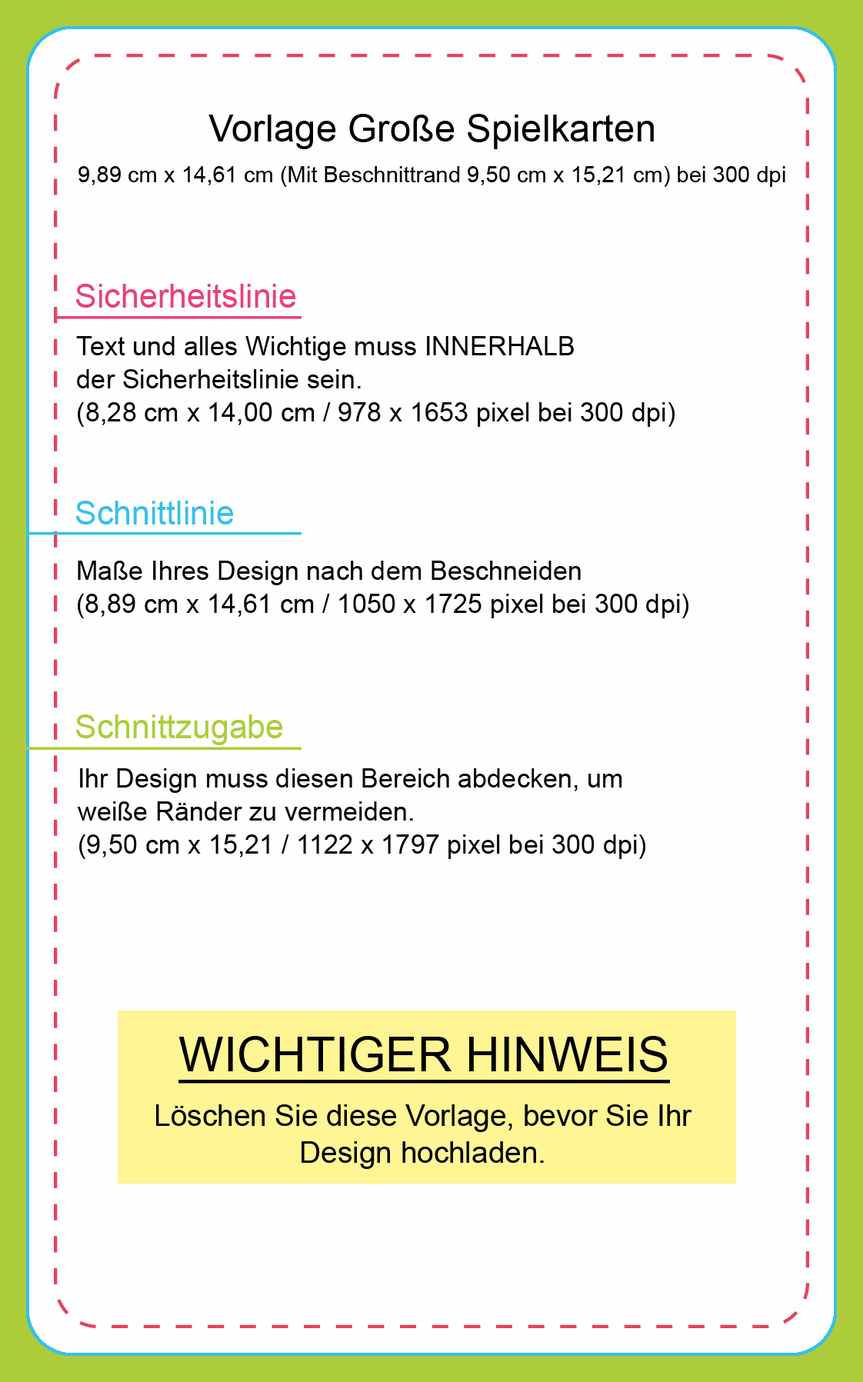
<style>
.page{position:relative;width:863px;height:1382px;background:#fefefe}
.page>*{position:absolute;margin:0}
.t1{font:38px "ArialMT";color:#000000}
.t2{font:22.4px "ArialMT";color:#000000}
.t3{font:33px "ArialMT";color:#e7427c}
.t4{font:26.4px/33px "ArialMT";color:#010000}
.t5{font:33px "ArialMT";color:#36c0ea}
.t6{font:33px "ArialMT";color:#adcc3a}
.t7{font:26.4px/33px "ArialMT";color:#020300}
.t8{font:47.8px "ArialMT";color:#000000;text-decoration:underline}
.t9{font:29.7px/37.2px "ArialMT";color:#000000}
</style>
<div class="page">
<p class="t1" style="left:208px;top:114px;width:446px;height:35px">Vorlage Große Spielkarten</p>
<p class="t2" style="left:78px;top:166px;width:707px;height:21px">9,89 cm x 14,61 cm (Mit Beschnittrand 9,50 cm x 15,21 cm) bei 300 dpi</p>
<p class="t3" style="left:76px;top:284px;width:219px;height:24px">Sicherheitslinie</p>
<p class="t4" style="left:76px;top:336px;width:598px;height:91px">Text und alles Wichtige muss INNERHALB<br>der Sicherheitslinie sein.<br>(8,28 cm x 14,00 cm / 978 x 1653 pixel bei 300 dpi)</p>
<p class="t5" style="left:76px;top:501px;width:157px;height:23px">Schnittlinie</p>
<p class="t4" style="left:78px;top:561px;width:610px;height:57px">Maße Ihres Design nach dem Beschneiden<br>(8,89 cm x 14,61 cm / 1050 x 1725 pixel bei 300 dpi)</p>
<p class="t6" style="left:76px;top:714px;width:206px;height:31px">Schnittzugabe</p>
<p class="t7" style="left:77px;top:768px;width:568px;height:91px">Ihr Design muss diesen Bereich abdecken, um<br>weiße Ränder zu vermeiden.<br>(9,50 cm x 15,21 / 1122 x 1797 pixel bei 300 dpi)</p>
<p class="t8" style="left:178px;top:1036px;width:492px;height:48px">WICHTIGER HINWEIS</p>
<p class="t9" style="left:156px;top:1104px;width:536px;height:65px;text-align:center">Löschen Sie diese Vorlage, bevor Sie Ihr<br>Design hochladen.</p>
</div>
